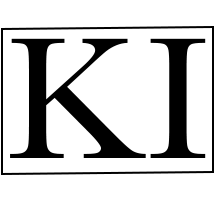
<style>
.page{position:relative;width:216px;height:198px;background:#ffffff}
.page>*{position:absolute;margin:0}
.t1{font:179.7px "Baskerville";color:#000000}
</style>
<div class="page">
<p class="t1" style="left:10px;top:38px;width:196px;height:120px">KI</p>
</div>
